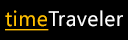
<style>
.page{position:relative;width:128px;height:40px;background:#000000}
.page>*{position:absolute;margin:0}
.t1{font:20.9px "SegoeUI";letter-spacing:0.025em;color:#ffffff}
.t2{font:20.9px "SegoeUI";letter-spacing:0.025em;color:#ffc000;text-decoration:underline}
</style>
<div class="page">
<p class="t1" style="left:5px;top:10px;width:118px;height:21px"><span class="t2">time</span>Traveler</p>
</div>
